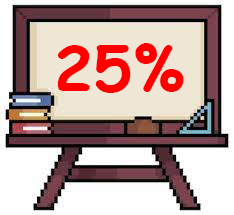
<style>
.page{position:relative;width:234px;height:215px}
.page>*{position:absolute;margin:0}
.t1{font:60px "ComicSansMS-Bold";color:#ff0000;scale:1.07 1}
</style>
<div class="page">
<p class="t1" style="left:57px;top:43px;width:127px;height:50px">25%</p>
</div>
